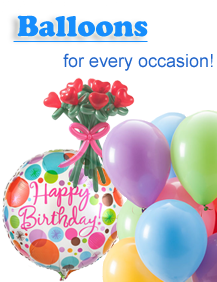
<style>
.page{position:relative;width:217px;height:282px;background:#ffffff}
.page>*{position:absolute;margin:0}
.t1{font:30px "CooperBlack";color:#168dfc}
.t2{font:18px "ArialMT";color:#2165cb}
</style>
<div class="page">
<p class="t1" style="left:17px;top:15px;width:131px;height:22px">Balloons</p>
<p class="t2" style="left:63px;top:53px;width:150px;height:18px">for every occasion!</p>
</div>
